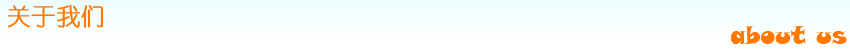
<style>
.page{position:relative;width:850px;height:50px;background:#ffffff}
.page>*{position:absolute;margin:0}
.t1{font:24px "YouYuan";color:#ff7800;font-weight:bold}
.t2{font:24px "SnapITC-Regular";color:#ff7800}
</style>
<div class="page">
<p class="t1" style="left:7px;top:4px;width:97px;height:24px">关于我们</p>
<p class="t2" style="left:730px;top:26px;width:117px;height:18px">about us</p>
</div>
